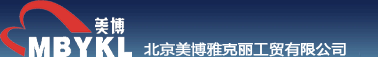
<style>
.page{position:relative;width:378px;height:57px}
.page>*{position:absolute;margin:0}
.t1{font:14px "MicrosoftYaHei";color:#ffffff;font-weight:bold;scale:1.09 1}
</style>
<div class="page">
<p class="t1" style="left:144px;top:42px;width:202px;height:15px">北京美博雅克丽工贸有限公司</p>
</div>
